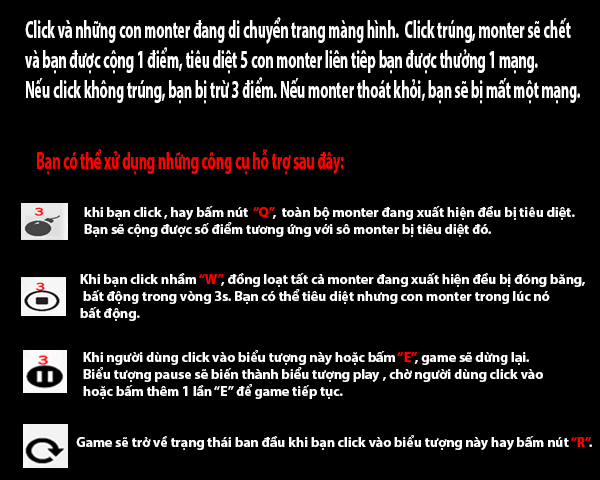
<style>
.page{position:relative;width:600px;height:480px;background:#000000}
.page>*{position:absolute;margin:0}
.t1{font:24.9px "MyriadPro-Bold";color:#ffffff;scale:0.56 1}
.t2{font:24px "MyriadPro-Bold";color:#ff0000;scale:0.58 1}
.t3{font:14px "MyriadPro-Bold";color:#ffffff}
.t4{font:14px "MyriadPro-Bold";color:#ff0000}
</style>
<div class="page">
<p class="t1" style="left:25px;top:17px;width:555px;height:87px">Click và những con monter đang di chuyển trang màng hình.  Click trúng, monter sẽ chết <br>và bạn được cộng 1 điểm, tiêu diệt 5 con monter liên tiêp bạn được thưởng 1 mạng. <br>Nếu click không trúng, bạn bị trừ 3 điểm. Nếu monter thoát khỏi, bạn sẽ bị mất một mạng.</p>
<p class="t2" style="left:37px;top:149px;width:307px;height:26px">Bạn có thể xử dụng những công cụ hỗ trợ sau đây:</p>
<p class="t3" style="left:84px;top:206px;width:491px;height:31px">khi bạn click , hay bấm nút  <span class="t4">“Q”</span>,  toàn bộ monter đang xuất hiện đều bị tiêu diệt. <br>Bạn sẽ cộng được số điểm tương ứng với sô monter bị tiêu diệt đó.</p>
<p class="t3" style="left:80px;top:273px;width:505px;height:48px">Khi bạn click nhầm <span class="t4">“W”</span>, đồng loạt tất cả monter đang xuất hiện đều bị đóng băng,<br> bất động trong vòng 3s. Bạn có thể tiêu diệt nhưng con monter trong lúc nó <br>bất động.</p>
<p class="t3" style="left:83px;top:350px;width:460px;height:49px">Khi người dùng click vào biểu tượng này hoặc bấm <span class="t4">“E”</span>, game sẽ dừng lại. <br>Biểu tượng pause sẽ biến thành biểu tượng play , chờ người dùng click vào <br>hoặc bấm thêm 1 lần “E” để game tiếp tục.</p>
<p class="t3" style="left:76px;top:435px;width:516px;height:15px">Game sẽ trở về trạng thái ban đầu khi bạn click vào biểu tượng này hay bấm nút <span class="t4">“R”</span>.</p>
</div>
